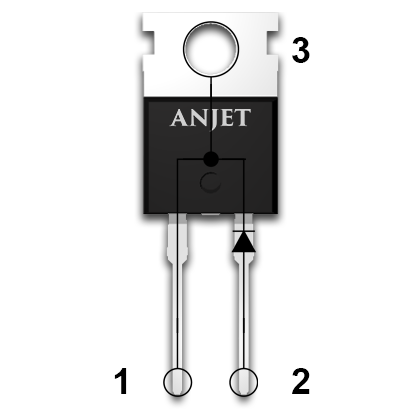
<style>
.page{position:relative;width:420px;height:420px;background:#ffffff}
.page>*{position:absolute;margin:0}
.t1{font:36px "Arial-BoldMT";letter-spacing:0.1em;color:#000000}
</style>
<div class="page">
<p class="t1" style="left:292px;top:37px;width:18px;height:26px">3</p>
<p class="t1" style="left:114px;top:368px;width:13px;height:26px">1</p>
<p class="t1" style="left:292px;top:368px;width:18px;height:26px">2</p>
</div>
